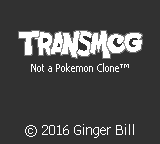
<style>
.page{position:relative;width:160px;height:144px;background:#313131}
.page>*{position:absolute;margin:0}
.t1{font:11px "Nina";color:#ffffff}
.t2{font:14px "Nina";color:#ffffff}
</style>
<div class="page">
<p class="t1" style="left:31px;top:63px;width:98px;height:9px">Not a Pokemon Clone™</p>
<p class="t2" style="left:25px;top:124px;width:109px;height:14px">© 2016 Ginger Bill</p>
</div>
